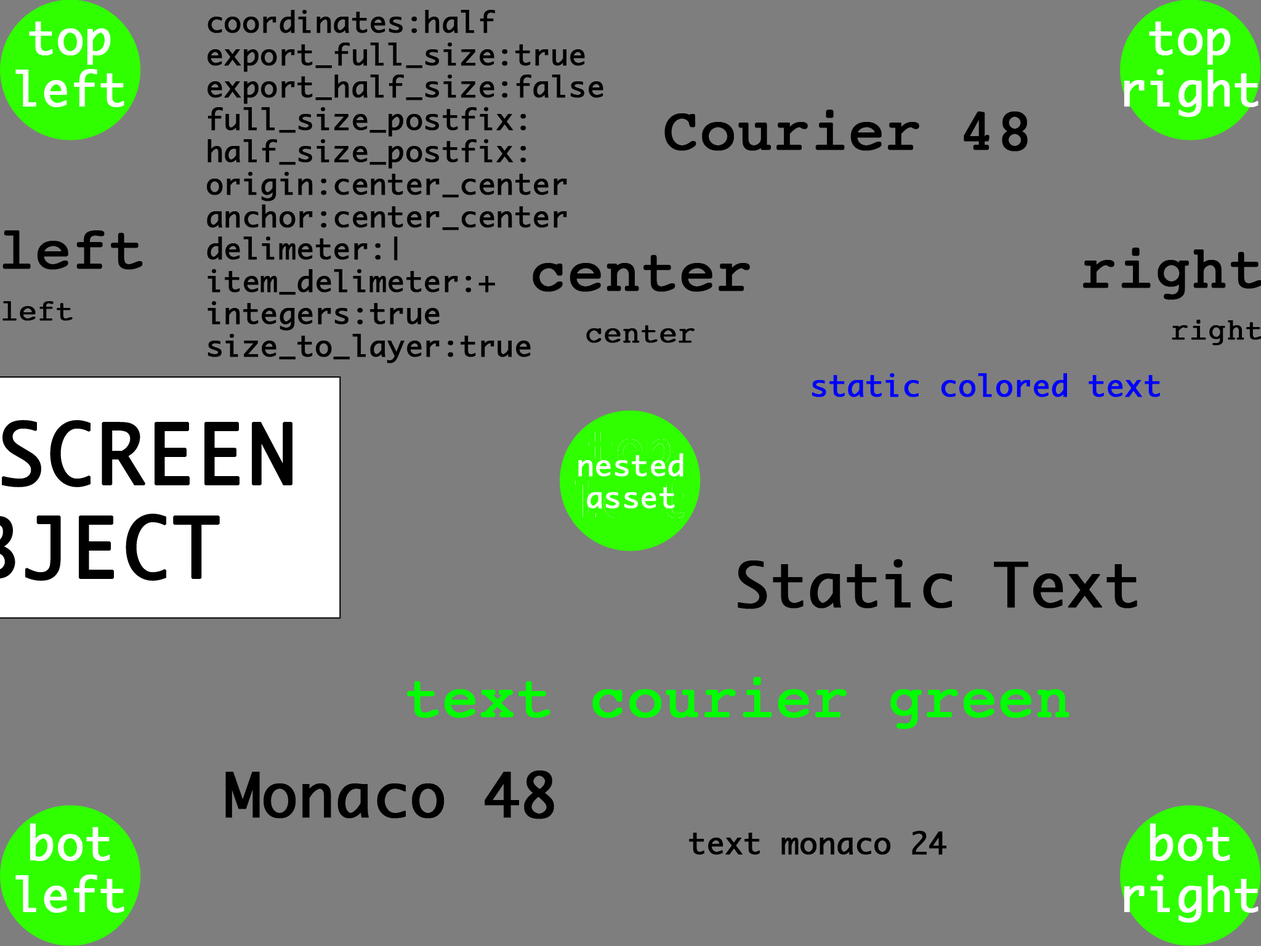
<style>
.page{position:relative;width:1261px;height:946px;background:#7e7e7e}
.page>*{position:absolute;margin:0}
.t1{font:28.9px "Monaco";color:#000000;font-weight:bold}
.t2{font:59.1px "Courier";color:#000000;font-weight:bold}
.t3{font:29.6px "Courier";color:#000000;font-weight:bold}
.t4{font:29.6px "Monaco";color:#0000ff;font-weight:bold}
.t5{font:59.1px "Monaco";color:#000000;font-weight:bold}
.t6{font:59.1px "Courier";color:#00ff00;font-weight:bold}
.t7{font:29.6px "Monaco";color:#000000;font-weight:bold}
</style>
<div class="page">
<p class="t1" style="left:207px;top:10px;width:396px;height:353px">coordinates:half<br>export_full_size:true<br>export_half_size:false<br>full_size_postfix:<br>half_size_postfix:<br>origin:center_center<br>anchor:center_center<br>delimeter:|<br>item_delimeter:+<br>integers:true<br>size_to_layer:true</p>
<p class="t2" style="left:664px;top:110px;width:364px;height:41px">Courier 48</p>
<p class="t2" style="left:2px;top:230px;width:141px;height:40px">left</p>
<p class="t2" style="left:533px;top:255px;width:217px;height:37px">center</p>
<p class="t3" style="left:2px;top:301px;width:71px;height:20px">left</p>
<p class="t3" style="left:586px;top:325px;width:108px;height:18px">center</p>
<p class="t3" style="left:1172px;top:320px;width:90px;height:25px">right</p>
<p class="t4" style="left:812px;top:373px;width:348px;height:24px">static colored text</p>
<p class="t5" style="left:738px;top:559px;width:399px;height:50px">Static Text</p>
<p class="t6" style="left:407px;top:677px;width:662px;height:52px">text courier green</p>
<p class="t5" style="left:225px;top:770px;width:329px;height:49px">Monaco 48</p>
<p class="t7" style="left:689px;top:831px;width:258px;height:24px">text monaco 24</p>
</div>
